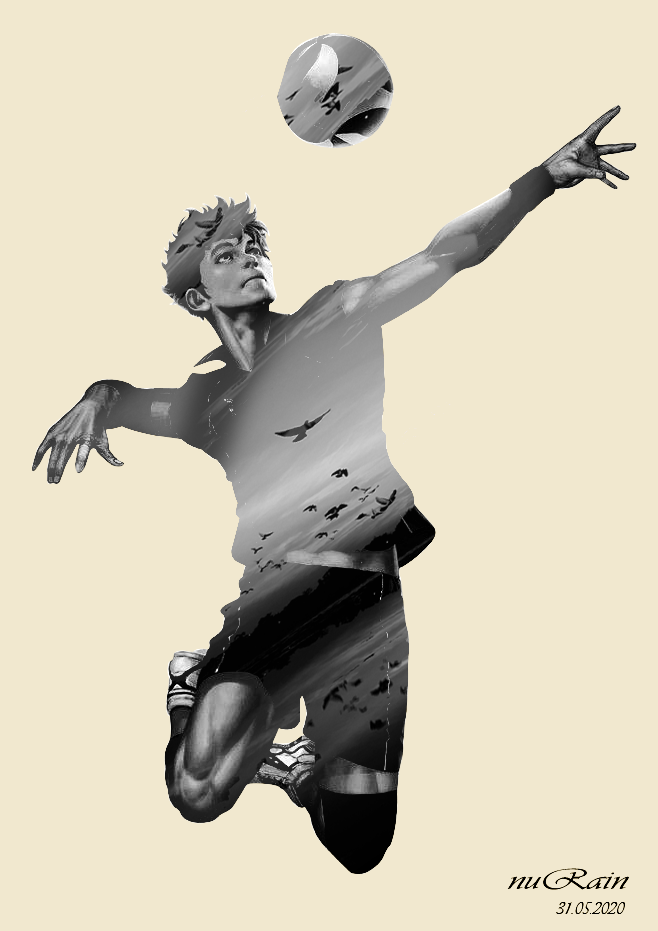
<style>
.page{position:relative;width:658px;height:931px;background:#f1e8cf}
.page>*{position:absolute;margin:0}
.t1{font:30px "Vivaldii";color:#000000;scale:1.42 1}
.t2{font:18px "Vivaldii";color:#000000}
</style>
<div class="page">
<p class="t1" style="left:507px;top:868px;width:122px;height:22px">nuRain</p>
<p class="t2" style="left:556px;top:902px;width:69px;height:12px">31.05.2020</p>
</div>
